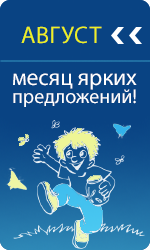
<style>
.page{position:relative;width:150px;height:250px;background:#094383}
.page>*{position:absolute;margin:0}
.t1{font:24px "MyriadPro-Regular";color:#edf122;text-transform:uppercase}
.t2{font:20px/18px "MyriadPro-Regular";color:#ffffff}
.t3{font:23px/18px "MyriadPro-Regular";color:#ffffff}
</style>
<div class="page">
<p class="t1" style="left:21px;top:26px;width:81px;height:18px">август</p>
<p class="t2" style="left:13px;top:73px;width:124px;height:34px"><span class="t3">месяц ярких <br></span>предложений!</p>
</div>
